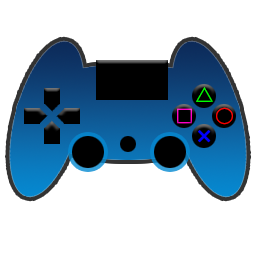
<style>
.page{position:relative;width:256px;height:256px;background:#ffffff}
.page>*{position:absolute;margin:0}
.t1{font:18px "KozGoPr6N-Heavy";color:#00ff00}
.t2{font:18px "KozGoPr6N-Heavy";color:#ff00c8}
.t3{font:18px "KozGoPr6N-Heavy";color:#ff0000}
.t4{font:18px "KozGoPr6N-Heavy";color:#0000ff}
</style>
<div class="page">
<p class="t1" style="left:196px;top:87px;width:17px;height:15px">△</p>
<p class="t2" style="left:177px;top:108px;width:15px;height:16px">□</p>
<p class="t3" style="left:216px;top:107px;width:17px;height:18px">○</p>
<p class="t4" style="left:198px;top:130px;width:13px;height:13px">×</p>
</div>
